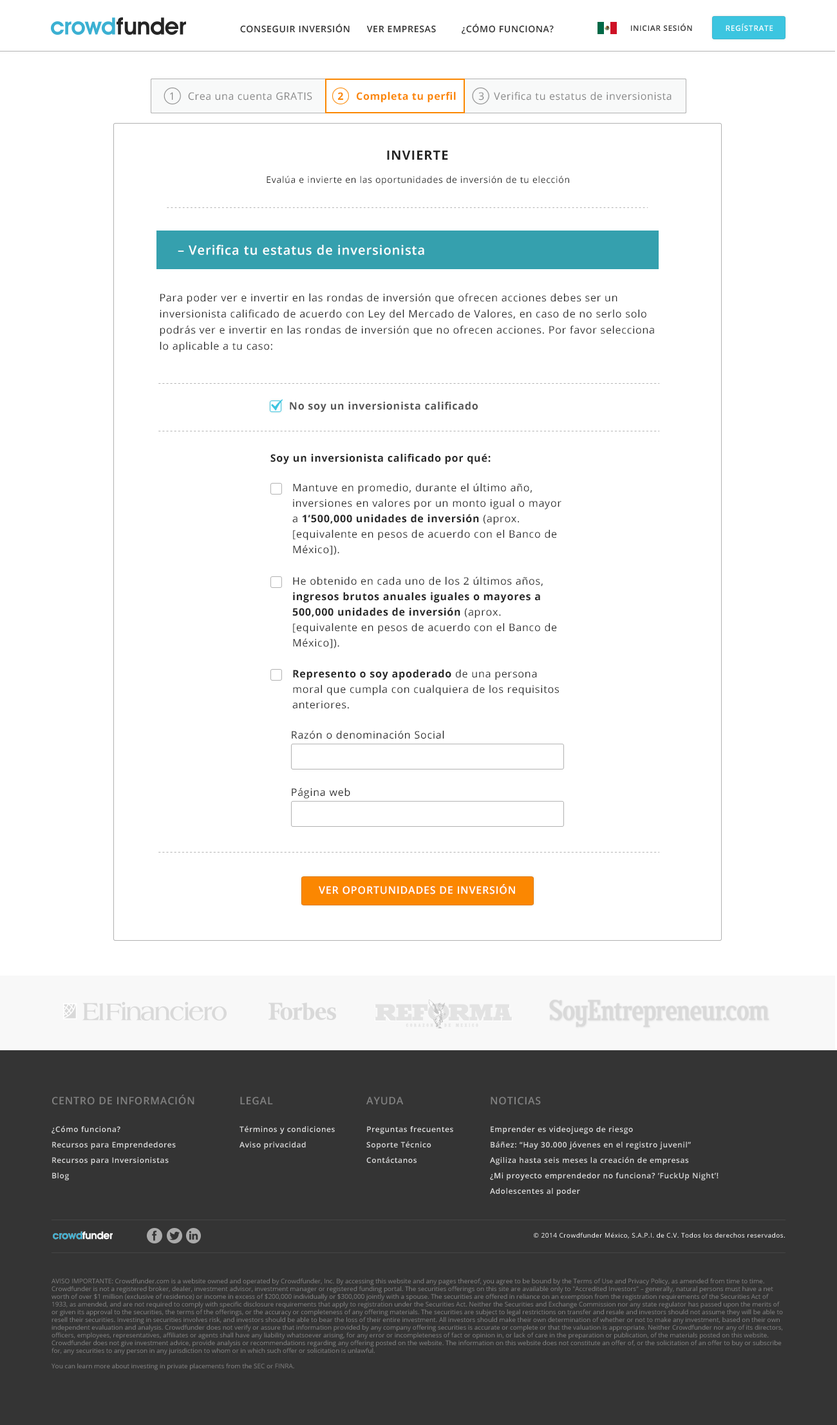
<style>
.page{position:relative;width:837px;height:1425px;background:#ffffff}
.page>*{position:absolute;margin:0}
.t1{font:10.3px "OpenSans";letter-spacing:0.04em;color:#858585}
.t2{font:10.3px "OpenSans-Bold";letter-spacing:0.04em;color:#fb8701}
.t3{font:12.9px "OpenSans-Bold";letter-spacing:0.05em;color:#252525;text-transform:uppercase}
.t4{font:9px "OpenSans";letter-spacing:0.05em;color:#252525}
.t5{font:12.9px "OpenSans-Semibold";letter-spacing:0.05em;color:#ffffff}
.t6{font:10.3px/16.1px "OpenSans";letter-spacing:0.05em;color:#252525}
.t7{font:10.3px "OpenSans-Bold";letter-spacing:0.05em;color:#555555}
.t8{font:10.3px "OpenSans-Bold";letter-spacing:0.05em;color:#252525}
.t9{font:10.3px/15.5px "OpenSans";letter-spacing:0.05em;color:#252525}
.t10{font:10.3px/15.5px "OpenSans-Bold";letter-spacing:0.05em;color:#252525}
.t11{font:10.3px "OpenSans";letter-spacing:0.05em;color:#252525}
.t12{font:10.3px "OpenSans-Semibold";letter-spacing:0.05em;color:#ffffff;text-transform:uppercase}
</style>
<div class="page">
<p class="t1" style="left:170px;top:91px;width:501px;height:11px">1    Crea una cuenta GRATIS       <span class="t2"> 2    Completa tu perfil    </span>   3   Verifica tu estatus de inversionista</p>
<p class="t3" style="left:387px;top:150px;width:61px;height:10px">INVIERTE</p>
<p class="t4" style="left:267px;top:176px;width:302px;height:9px">Evalúa e invierte en las oportunidades de inversión de tu elección</p>
<p class="t5" style="left:178px;top:245px;width:246px;height:10px">– Verifica tu estatus de inversionista</p>
<p class="t6" style="left:160px;top:293px;width:494px;height:59px">Para poder ver e invertir en las rondas de inversión que ofrecen acciones debes ser un inversionista calificado de acuerdo con Ley del Mercado de Valores, en caso de no serlo solo podrás ver e invertir en las rondas de inversión que no ofrecen acciones. Por favor selecciona lo aplicable a tu caso:</p>
<p class="t7" style="left:290px;top:401px;width:188px;height:11px">No soy un inversionista calificado</p>
<p class="t8" style="left:270px;top:453px;width:221px;height:11px">Soy un inversionista calificado por qué:</p>
<p class="t9" style="left:292px;top:483px;width:269px;height:72px">Mantuve en promedio, durante el último año, inversiones en valores por un monto igual o mayor a <span class="t10">1’500,000 unidades de inversión</span> (aprox. [equivalente en pesos de acuerdo con el Banco de México]).</p>
<p class="t10" style="left:292px;top:576px;width:265px;height:72px"><span class="t9">He obtenido en cada uno de los 2 últimos años, </span>ingresos brutos anuales iguales o mayores a 500,000 unidades de inversión<span class="t9"> (aprox. [equivalente en pesos de acuerdo con el Banco de México]).</span></p>
<p class="t9" style="left:292px;top:669px;width:267px;height:40px"><span class="t10">Represento o soy apoderado</span> de una persona moral que cumpla con cualquiera de los requisitos anteriores.</p>
<p class="t11" style="left:292px;top:730px;width:152px;height:9px">Razón o denominación Social</p>
<p class="t11" style="left:292px;top:787px;width:58px;height:11px">Página web</p>
<p class="t12" style="left:319px;top:884px;width:196px;height:10px">VER OPORTUNIDADES DE INVERSIÓN</p>
</div>
